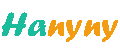
<style>
.page{position:relative;width:120px;height:50px;background:#ffffff}
.page>*{position:absolute;margin:0}
.t1{font:35.3px "ForteMT";color:#f39c12}
.t2{font:35.3px "ForteMT";color:#1abc9c}
</style>
<div class="page">
<p class="t1" style="left:2px;top:12px;width:116px;height:30px"><span class="t2">Ha</span>nyny</p>
</div>
